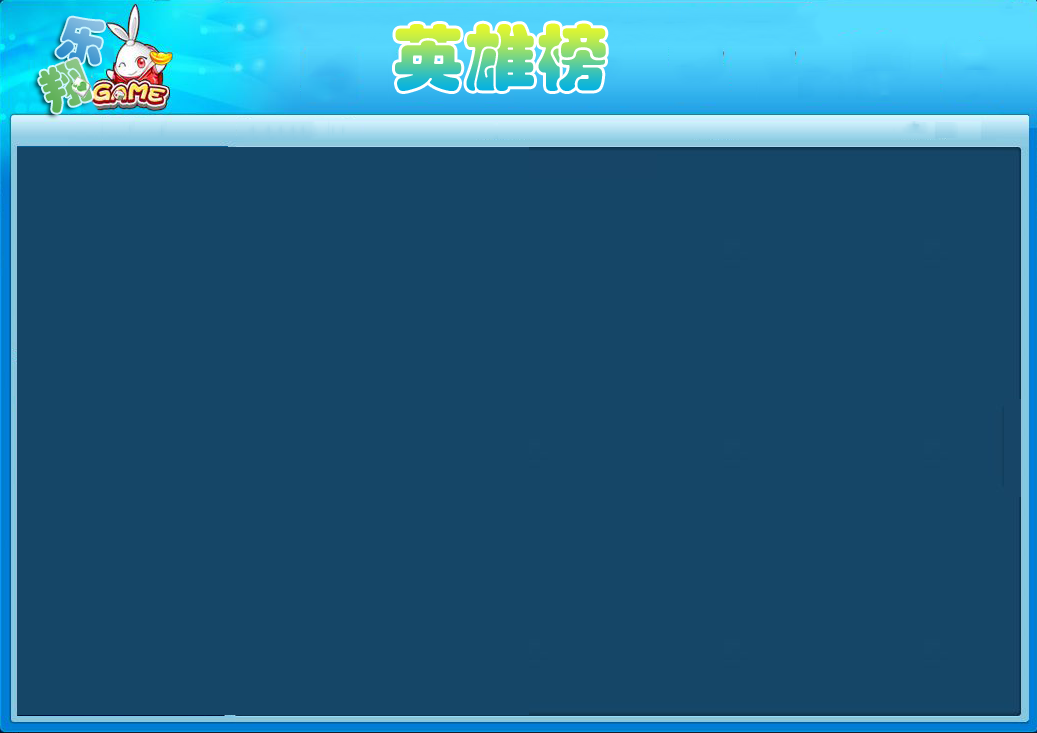
<style>
.page{position:relative;width:1037px;height:733px;background:#154667}
.page>*{position:absolute;margin:0}
.t1{font:72px "STHupo"}
</style>
<div class="page">
<p class="t1" style="left:395px;top:23px;width:211px;height:68px">英雄榜</p>
</div>
